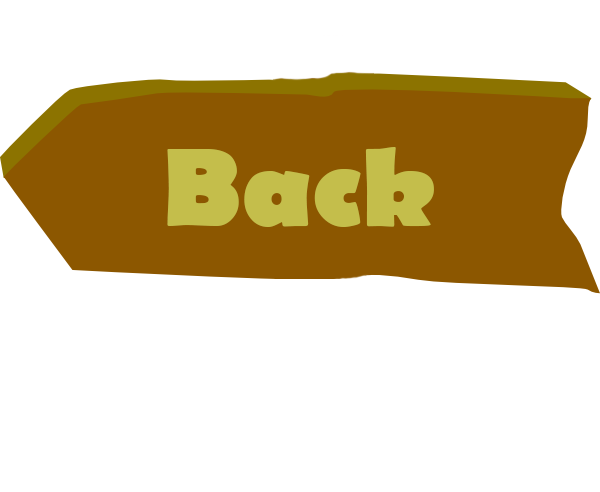
<style>
.page{position:relative;width:600px;height:492px;background:#ffffff}
.page>*{position:absolute;margin:0}
.t1{font:113.4px "BerlinSansFB-Bold";color:#c4be4b}
</style>
<div class="page">
<p class="t1" style="left:167px;top:147px;width:267px;height:80px">Back</p>
</div>
